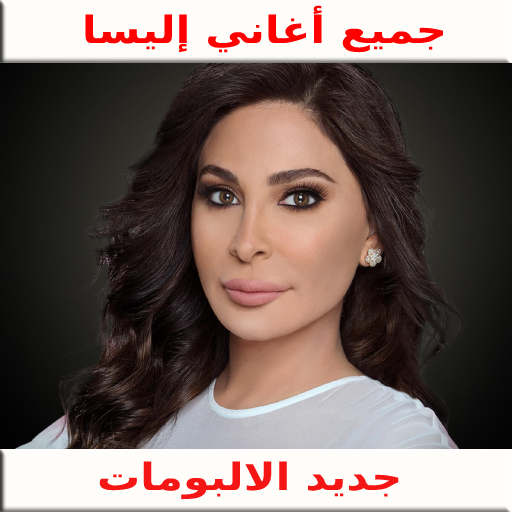
<style>
.page{position:relative;width:512px;height:512px}
.page>*{position:absolute;margin:0}
.t1{font:37.5px "DejaVuSans-Bold";color:#ff0000;scale:1.15 1}
.t2{font:37.5px "DejaVuSans-Bold";color:#f41515;scale:1.15 1}
</style>
<div class="page">
<p class="t1" style="left:85px;top:5px;width:358px;height:48px">جميع أغاني إليسا</p>
<p class="t2" style="left:99px;top:461px;width:300px;height:39px">جديد الالبومات</p>
</div>
